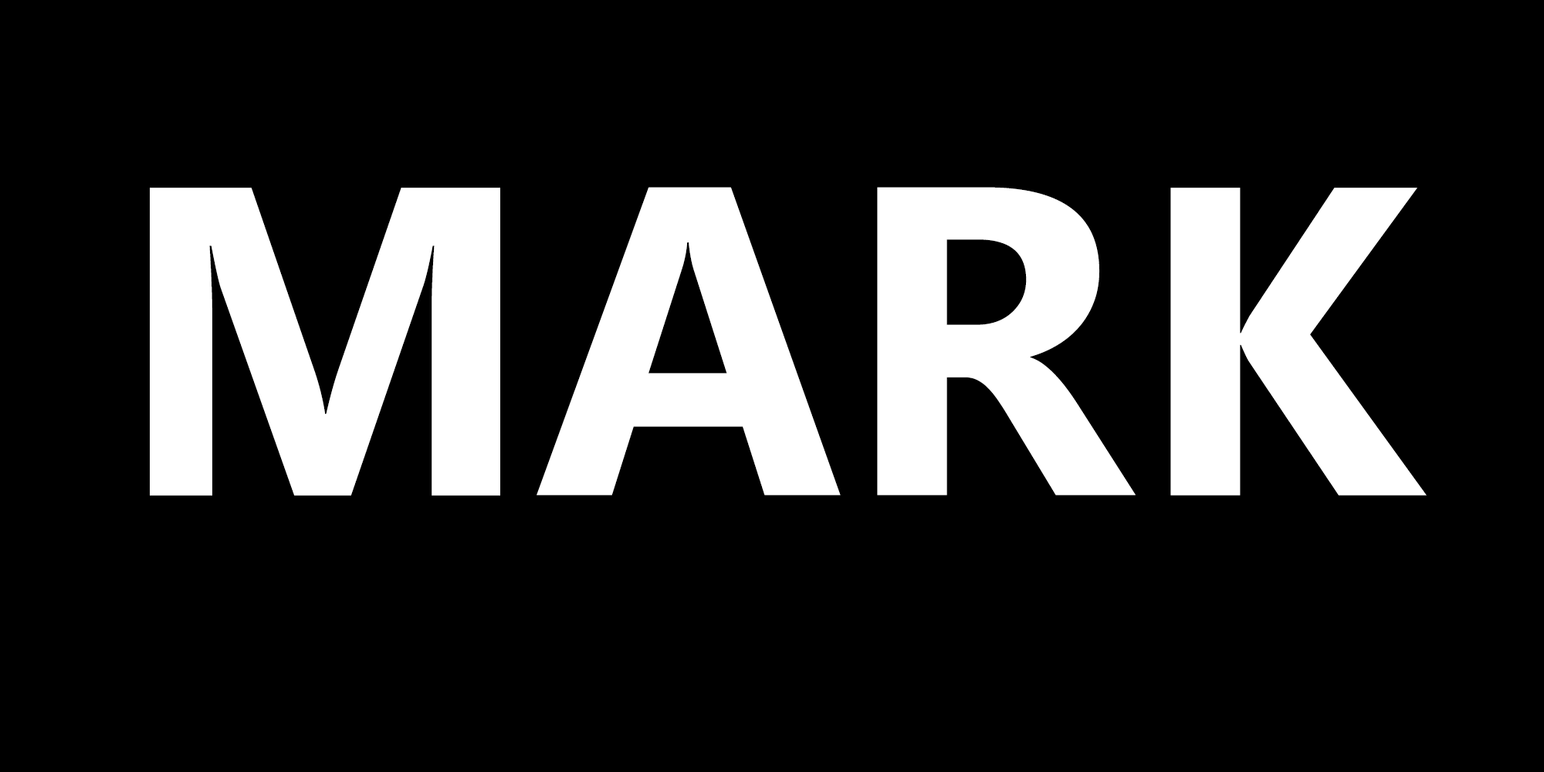
<style>
.page{position:relative;width:1544px;height:772px;background:#000000}
.page>*{position:absolute;margin:0}
.t1{font:439.1px "Ebrima-Bold";letter-spacing:-0.05em;color:#ffffff}
</style>
<div class="page">
<p class="t1" style="left:150px;top:188px;width:350px;height:308px">M</p>
<p class="t1" style="left:537px;top:187px;width:304px;height:309px">A</p>
<p class="t1" style="left:877px;top:187px;width:259px;height:309px">R</p>
<p class="t1" style="left:1171px;top:188px;width:256px;height:308px">K</p>
</div>
